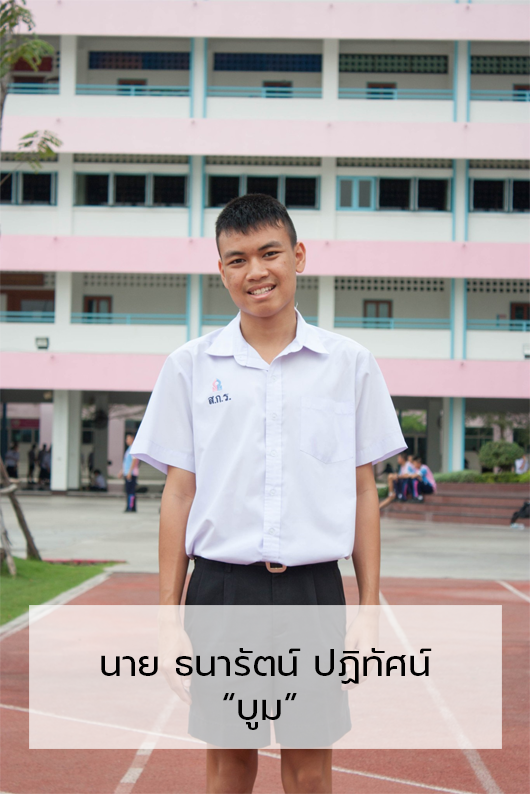
<style>
.page{position:relative;width:530px;height:794px}
.page>*{position:absolute;margin:0}
.t1{font:36.7px "Prompt-Regular";color:#000000}
</style>
<div class="page">
<p class="t1" style="left:101px;top:648px;width:331px;height:82px">นาย ธนารัตน์ ปฏิทัศน์<br>         “บูม”</p>
</div>
